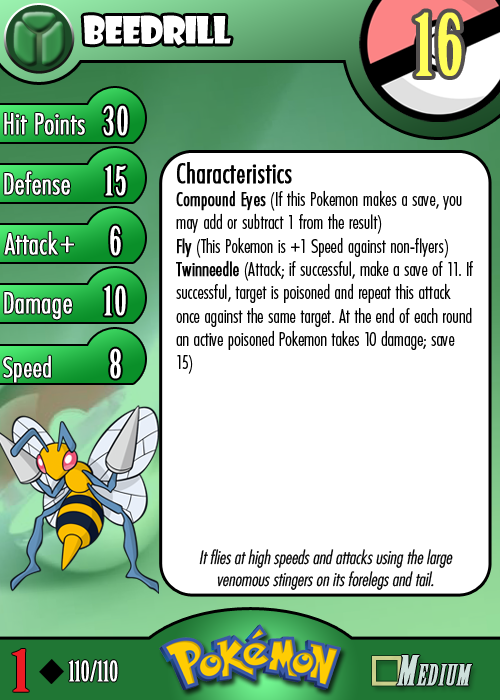
<style>
.page{position:relative;width:500px;height:700px;background:#ffffff}
.page>*{position:absolute;margin:0}
.t1{font:36.7px "ShowcardGothic-Reg";letter-spacing:-0.025em;color:#ffffff;scale:0.91 1}
.t2{font:83.3px "BirchStd";letter-spacing:0.025em;color:#fffd59;font-weight:bold}
.t3{font:27.8px "Futura-CondensedLight";color:#ffffff;font-weight:bold}
.t4{font:38.9px "BirchStd";letter-spacing:0.035em;color:#ffffff;font-weight:bold}
.t5{font:19.4px "FuturaCondensedBQ-Light";color:#010101}
.t6{font:27.8px "FuturaCondensedBQ-Light";color:#010101;font-weight:bold}
.t7{font:19.4px "FuturaCondensedBQ-Light";color:#010101;font-weight:bold}
.t8{font:30.6px "Futura-CondensedLight";color:#ffffff;font-weight:bold}
.t9{font:27.8px "FuturaCondensedBQ-Light";color:#ffffff;font-weight:bold}
.t10{font:18.1px "Futura-CondensedLight";color:#010101;font-style:italic}
.t11{font:55.6px "BirchStd";color:#ed1c24;font-weight:bold;scale:1.5 1}
.t12{font:27.8px "BirchStd";color:#ffffff;font-weight:bold}
</style>
<div class="page">
<p class="t1" style="left:83px;top:15px;width:148px;height:31px">beedrill</p>
<p class="t2" style="left:415px;top:12px;width:47px;height:64px">16</p>
<p class="t3" style="left:4px;top:113px;width:81px;height:22px">Hit Points</p>
<p class="t4" style="left:103px;top:105px;width:25px;height:31px">30</p>
<p class="t3" style="left:4px;top:171px;width:66px;height:24px">Defense</p>
<p class="t4" style="left:105px;top:165px;width:21px;height:31px">15</p>
<p class="t5" style="left:176px;top:162px;width:297px;height:212px"><span class="t6">Characteristics<br></span><span class="t7">Compound Eyes</span> (If this Pokemon makes a save, you may add or subtract 1 from the result)<br><span class="t7">Fly</span> (This Pokemon is +1 Speed against non-flyers)<br><span class="t7">Twinneedle</span> (Attack; if successful, make a save of 11. If successful, target is poisoned and repeat this attack once against the same target. At the end of each round an active poisoned Pokemon takes 10 damage; save 15)</p>
<p class="t3" style="left:4px;top:231px;width:54px;height:24px">Attack</p>
<p class="t4" style="left:110px;top:225px;width:11px;height:31px">6</p>
<p class="t8" style="left:60px;top:236px;width:14px;height:17px">+</p>
<p class="t3" style="left:4px;top:292px;width:68px;height:28px">Damage</p>
<p class="t4" style="left:104px;top:285px;width:22px;height:31px">10</p>
<p class="t4" style="left:110px;top:348px;width:11px;height:31px">8</p>
<p class="t9" style="left:3px;top:355px;width:48px;height:28px">Speed</p>
<p class="t10" style="left:199px;top:549px;width:254px;height:41px;text-align:center">It flies at high speeds and attacks using the large venomous stingers on its forelegs and tail.</p>
<p class="t11" style="left:12px;top:649px;width:17px;height:43px">1</p>
<p class="t12" style="left:68px;top:660px;width:50px;height:22px">110/110</p>
</div>
